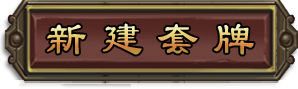
<style>
.page{position:relative;width:298px;height:89px}
.page>*{position:absolute;margin:0}
.t1{font:49.1px "LiSu";letter-spacing:0.34em;scale:0.85 1}
</style>
<div class="page">
<p class="t1" style="left:46px;top:23px;width:208px;height:32px">新建套牌</p>
</div>
